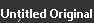
<style>
.page{position:relative;width:94px;height:23px;background:#333333}
.page>*{position:absolute;margin:0}
.t1{font:12px "MyanmarText-Bold";color:#ffffff}
</style>
<div class="page">
<p class="t1" style="left:1px;top:9px;width:91px;height:12px">Untitled Original</p>
</div>
